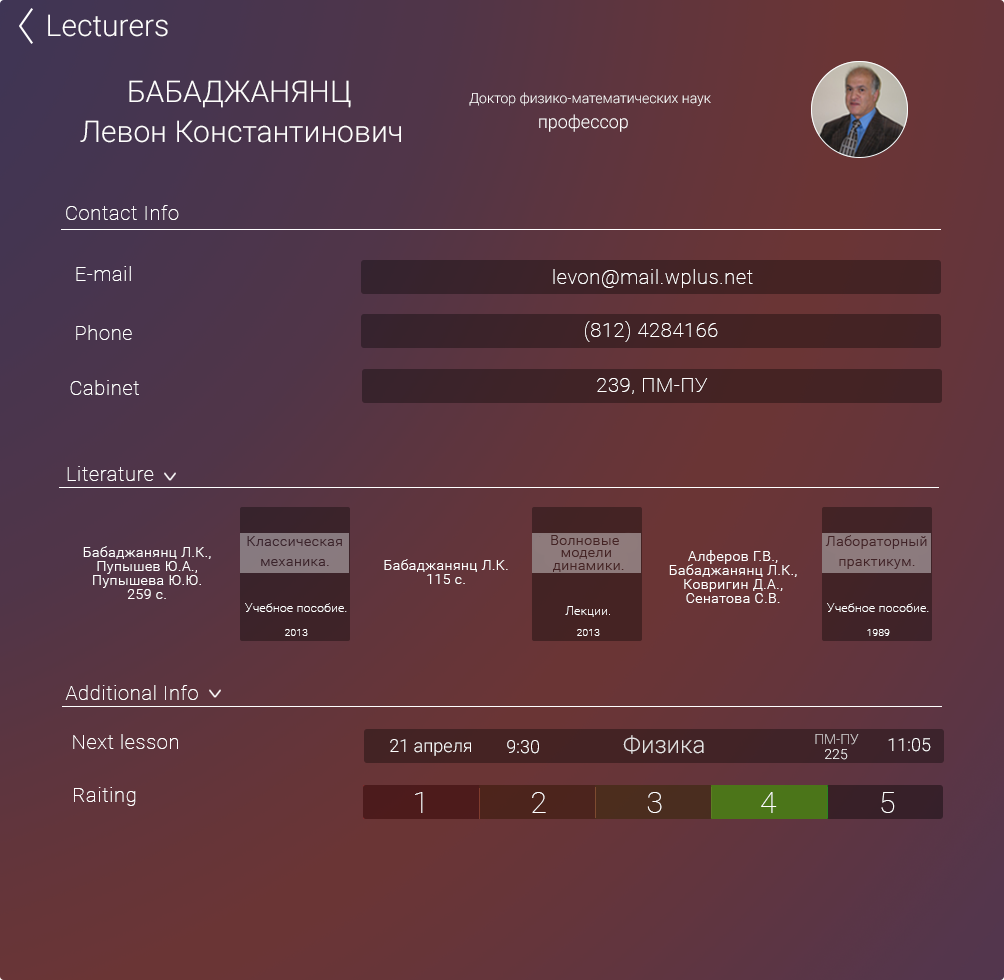
<style>
.page{position:relative;width:1004px;height:980px}
.page>*{position:absolute;margin:0}
.t1{font:30px "Roboto-Light";color:#fefdfd}
.t2{font:14px "Roboto-Light";color:#fefdfd}
.t3{font:18px "Roboto-Light";color:#fefdfd}
.t4{font:20px "Roboto-Thin";letter-spacing:0.035em;color:#ffffff}
.t5{font:14px/14px "Roboto-Light";letter-spacing:0.035em;color:#ffffff}
.t6{font:12px "Roboto-Thin";letter-spacing:0.035em;color:#ffffff}
.t7{font:10px "Roboto-Thin";letter-spacing:0.035em;color:#ffffff}
.t8{font:24px "Roboto-Light";color:#e4e2e2}
.t9{font:14px "Roboto-Light"}
.t10{font:18px "Roboto-Light";color:#fefefe}
.t11{font:14px "Roboto-Light";color:#fefefe}
.t12{font:30px "Roboto-Thin";letter-spacing:0.035em;color:#ffffff}
</style>
<div class="page">
<p class="t1" style="left:48px;top:14px;width:120px;height:23px">Lecturers</p>
<p class="t1" style="left:129px;top:80px;width:222px;height:28px">БАБАДЖАНЯНЦ</p>
<p class="t2" style="left:469px;top:92px;width:242px;height:14px">Доктор физико-математических наук</p>
<p class="t1" style="left:80px;top:120px;width:321px;height:23px">Левон Константинович</p>
<p class="t3" style="left:539px;top:114px;width:89px;height:18px">профессор</p>
<p class="t4" style="left:66px;top:205px;width:113px;height:15px">Contact Info</p>
<p class="t4" style="left:76px;top:266px;width:55px;height:15px">E-mail</p>
<p class="t4" style="left:553px;top:269px;width:200px;height:19px">levon@mail.wplus.net</p>
<p class="t4" style="left:76px;top:325px;width:56px;height:15px">Phone</p>
<p class="t4" style="left:585px;top:321px;width:133px;height:21px">(812) 4284166</p>
<p class="t4" style="left:70px;top:380px;width:69px;height:15px">Cabinet</p>
<p class="t4" style="left:597px;top:378px;width:111px;height:16px">239, ПМ-ПУ</p>
<p class="t4" style="left:67px;top:466px;width:87px;height:15px">Literature</p>
<p class="t5" style="left:83px;top:546px;width:128px;height:53px;text-align:center">Бабаджанянц Л.К., Пупышев Ю.А., Пупышева Ю.Ю.<br>259 c.</p>
<p class="t5" style="left:669px;top:550px;width:128px;height:53px;text-align:center">Алферов Г.В., Бабаджанянц Л.К., Ковригин Д.А., Сенатова С.В.</p>
<p class="t5" style="left:384px;top:559px;width:124px;height:25px;text-align:center">Бабаджанянц Л.К.<br>115 c.</p>
<p class="t6" style="left:245px;top:603px;width:102px;height:9px">Учебное пособие.</p>
<p class="t6" style="left:565px;top:606px;width:45px;height:11px">Лекции.</p>
<p class="t6" style="left:827px;top:603px;width:102px;height:9px">Учебное пособие.</p>
<p class="t7" style="left:285px;top:629px;width:23px;height:7px">2013</p>
<p class="t7" style="left:577px;top:629px;width:23px;height:7px">2013</p>
<p class="t7" style="left:867px;top:629px;width:23px;height:7px">1989</p>
<p class="t4" style="left:65px;top:685px;width:133px;height:15px">Additional Info</p>
<p class="t4" style="left:73px;top:734px;width:105px;height:15px">Next lesson</p>
<p class="t8" style="left:623px;top:735px;width:81px;height:19px">Физика</p>
<p class="t9" style="left:815px;top:734px;width:44px;height:11px">ПМ-ПУ</p>
<p class="t10" style="left:390px;top:739px;width:81px;height:17px">21 апреля</p>
<p class="t10" style="left:507px;top:740px;width:32px;height:14px">9:30</p>
<p class="t11" style="left:825px;top:749px;width:23px;height:11px">225</p>
<p class="t10" style="left:888px;top:738px;width:43px;height:14px">11:05</p>
<p class="t4" style="left:74px;top:787px;width:62px;height:19px">Raiting</p>
<p class="t12" style="left:415px;top:792px;width:8px;height:21px">1</p>
<p class="t12" style="left:532px;top:792px;width:14px;height:21px">2</p>
<p class="t12" style="left:647px;top:792px;width:15px;height:21px">3</p>
<p class="t12" style="left:761px;top:792px;width:16px;height:21px">4</p>
<p class="t12" style="left:881px;top:792px;width:14px;height:21px">5</p>
</div>
